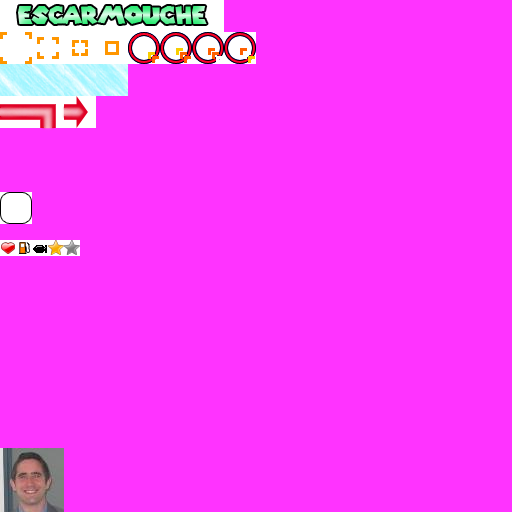
<style>
.page{position:relative;width:512px;height:512px;background:#ff33ff}
.page>*{position:absolute;margin:0}
.t1{font:24px "SuperMarioGalaxy"}
</style>
<div class="page">
<p class="t1" style="left:18px;top:6px;width:189px;height:18px">Escarmouche</p>
</div>
